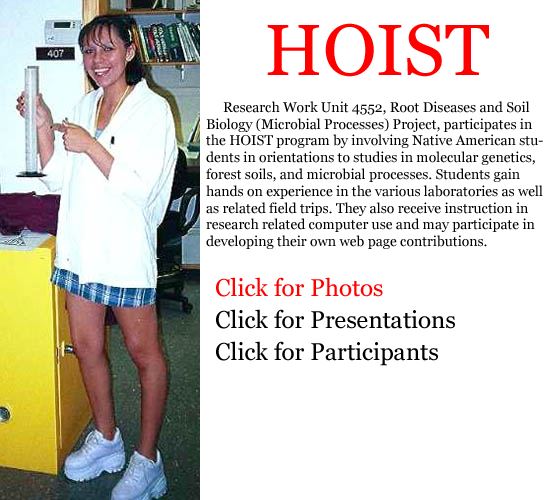
<style>
.page{position:relative;width:550px;height:500px;background:#ffffff}
.page>*{position:absolute;margin:0}
.t1{font:72px "Georgia";color:#ff0000}
.t2{font:14px "Georgia";color:#000000}
.t3{font:24px "Georgia";color:#ff0000}
.t4{font:24px "Georgia";color:#000000}
</style>
<div class="page">
<p class="t1" style="left:267px;top:23px;width:222px;height:54px">HOIST</p>
<p class="t2" style="left:206px;top:101px;width:337px;height:148px">Research Work Unit 4552, Root Diseases and Soil Biology (Microbial Processes) Project, participates in the HOIST program by involving Native American students in orientations to studies in molecular genetics, forest soils, and microbial processes. Students gain hands on experience in the various laboratories as well as related field trips. They also receive instruction in research related computer use and may participate in developing their own web page contributions.</p>
<p class="t3" style="left:216px;top:277px;width:167px;height:20px">Click for Photos</p>
<p class="t4" style="left:216px;top:309px;width:239px;height:20px">Click for Presentations</p>
<p class="t4" style="left:216px;top:341px;width:222px;height:25px">Click for Participants</p>
</div>
